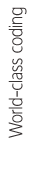
<style>
.page{position:relative;width:34px;height:180px;background:#ffffff}
.page>*{position:absolute;margin:0}
.t1{font:20px "IntervalSansPro-LightCond";color:#393535}
</style>
<div class="page">
<p class="t1" style="left:8px;top:7px;width:19px;height:131px;rotate:-90deg">World-class coding</p>
</div>
